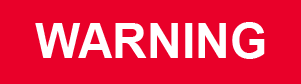
<style>
.page{position:relative;width:301px;height:84px;background:#e90029}
.page>*{position:absolute;margin:0}
.t1{font:48px "Arial-BoldMT";color:#ffffff}
</style>
<div class="page">
<p class="t1" style="left:35px;top:22px;width:230px;height:37px">WARNING</p>
</div>
